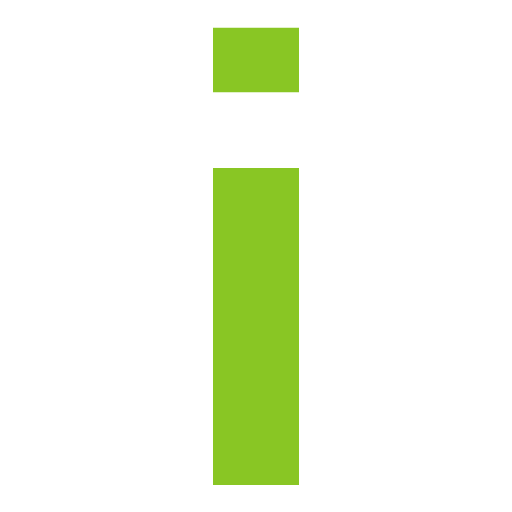
<style>
.page{position:relative;width:512px;height:512px;background:#ffffff}
.page>*{position:absolute;margin:0}
.t1{font:600px "Roboto-Bold";color:#89c624}
</style>
<div class="page">
<p class="t1" style="left:213px;top:27px;width:86px;height:458px">i</p>
</div>
